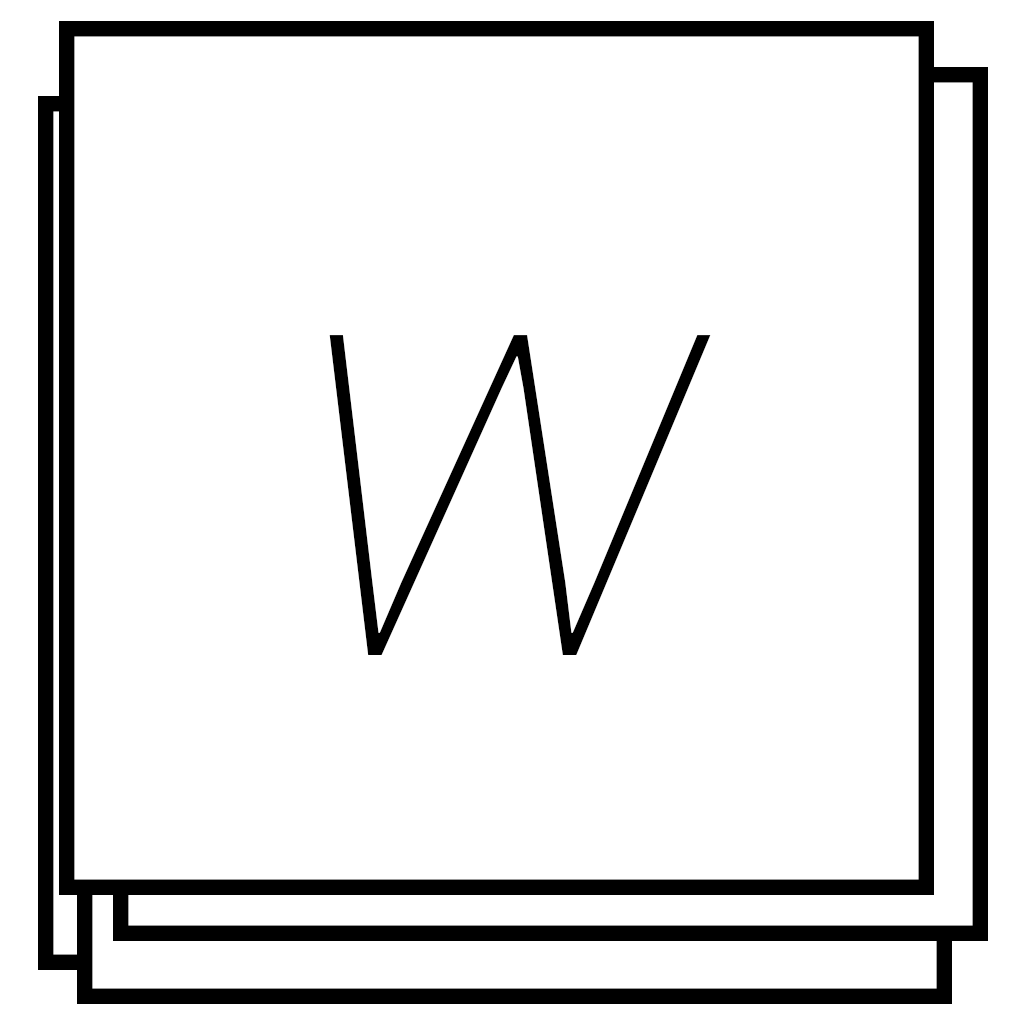
<style>
.page{position:relative;width:1024px;height:1024px;background:#ffffff}
.page>*{position:absolute;margin:0}
.t1{font:450px "Roboto-ThinItalic";color:#000000}
</style>
<div class="page">
<p class="t1" style="left:329px;top:335px;width:382px;height:320px">W</p>
</div>
